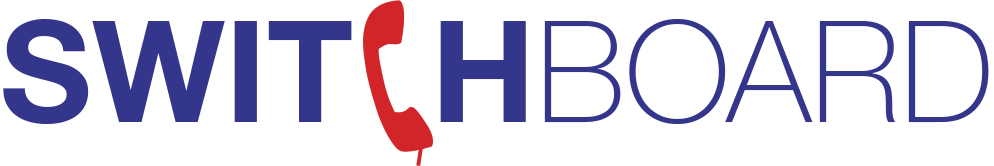
<style>
.page{position:relative;width:994px;height:166px;background:#ffffff}
.page>*{position:absolute;margin:0}
.t1{font:141px "HelveticaNeue-Bold";color:#34368b}
.t2{font:141px "HelveticaNeue-Thin";color:#34368b}
</style>
<div class="page">
<p class="t1" style="left:3px;top:19px;width:986px;height:105px">SWIT  H<span class="t2">BOARD</span></p>
</div>
